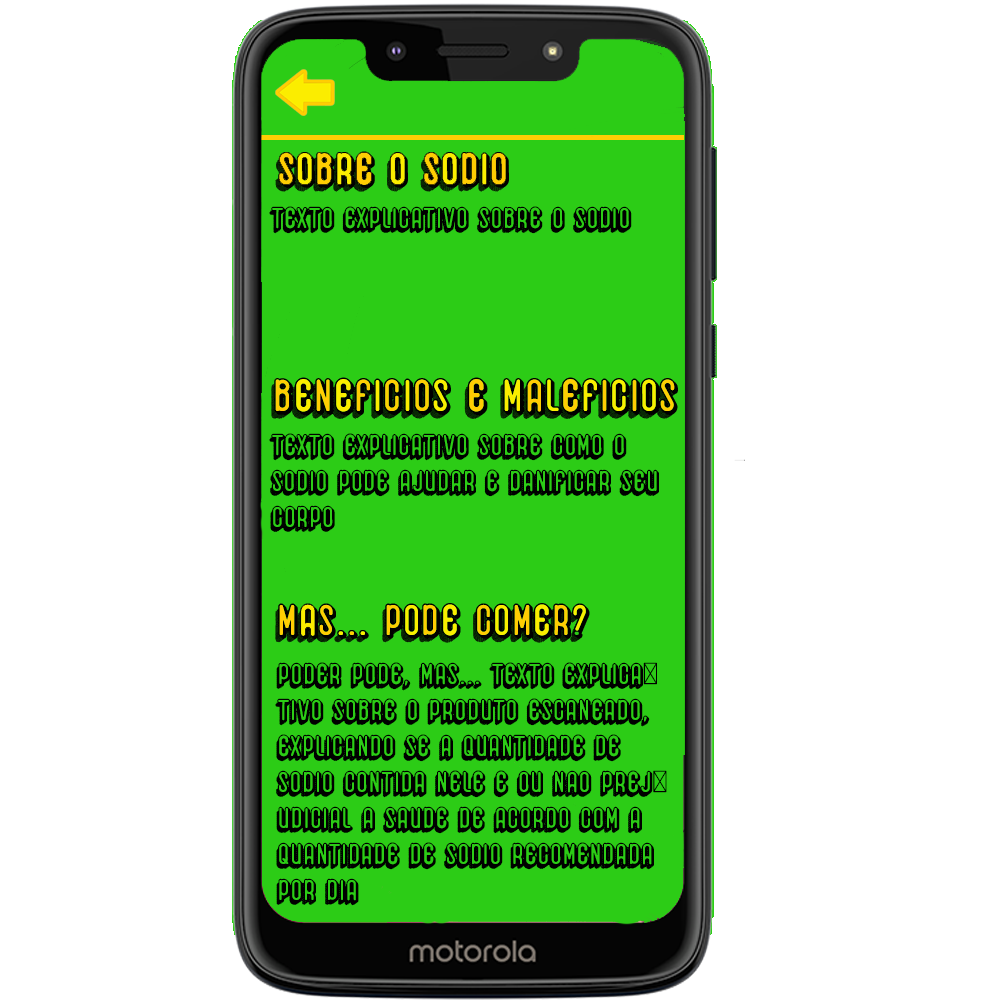
<style>
.page{position:relative;width:1000px;height:1000px;background:#ffffff}
.page>*{position:absolute;margin:0}
.t1{font:30px "HemondalisaRegular";color:#000000}
</style>
<div class="page">
<p class="t1" style="left:269px;top:206px;width:363px;height:28px">Texto explicativo sobre o sódio</p>
<p class="t1" style="left:269px;top:433px;width:390px;height:99px">Texto explicativo sobre como o sódio pode ajudar e danificar seu corpo</p>
<p class="t1" style="left:275px;top:662px;width:392px;height:244px">Poder pode, mas... tEXTO EXPLICATIVO SOBRE O PRODUTO ESCANEADO, EXPLICANDO SE A QUANTIDADE DE SODIO CONTIDA NELE É OU NAO PREJUDICIAL A SAUDE DE ACORDO COM A QUANTIDADE DE SODIO RECOMENDADA POR DIA</p>
</div>
